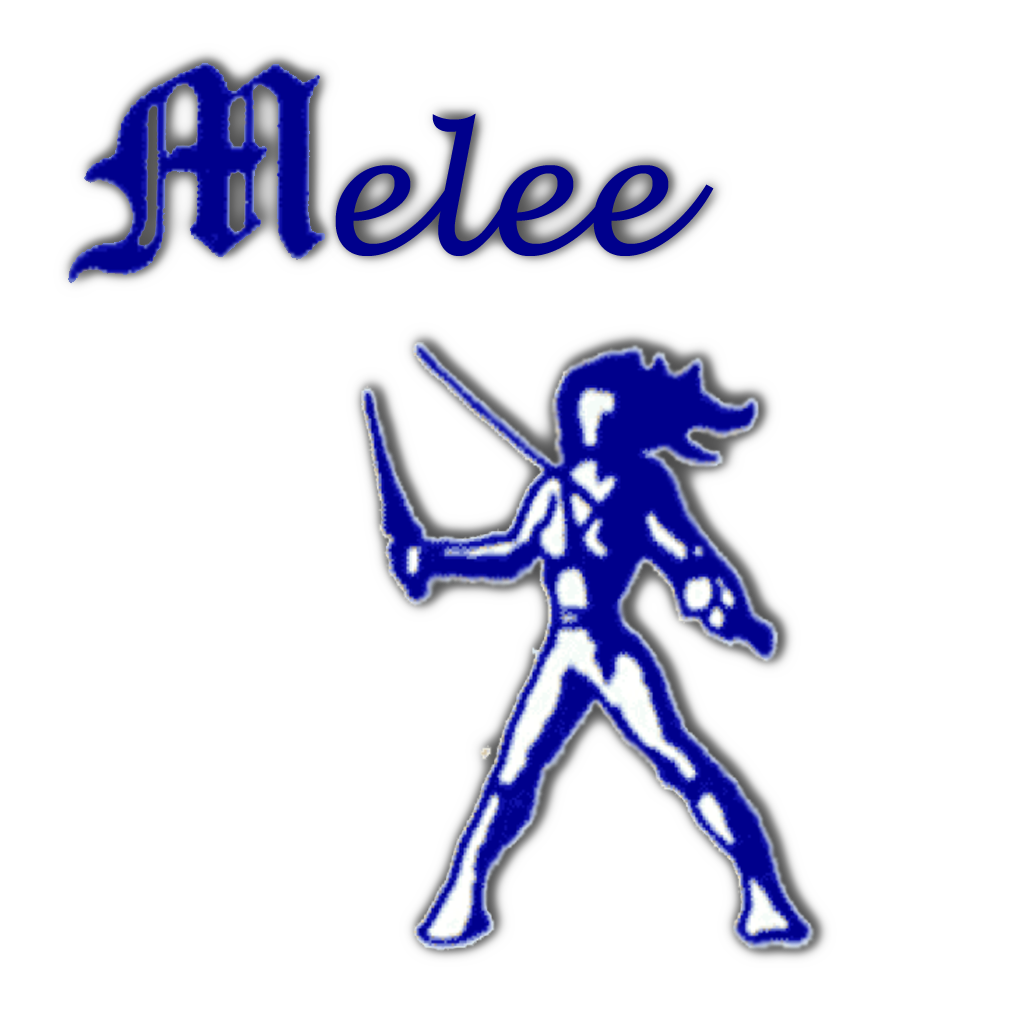
<style>
.page{position:relative;width:1024px;height:1024px;background:#ffffff}
.page>*{position:absolute;margin:0}
.t1{font:164px "LucidaHandwriting-Italic";color:#00008c}
</style>
<div class="page">
<p class="t1" style="left:335px;top:113px;width:379px;height:143px">elee</p>
</div>
